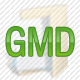
<style>
.page{position:relative;width:80px;height:80px}
.page>*{position:absolute;margin:0}
.t1{font:37.2px "Swiss721BT-RomanCondensed";color:#66b423;text-transform:uppercase}
</style>
<div class="page">
<p class="t1" style="left:6px;top:27px;width:68px;height:30px">GMD</p>
</div>
